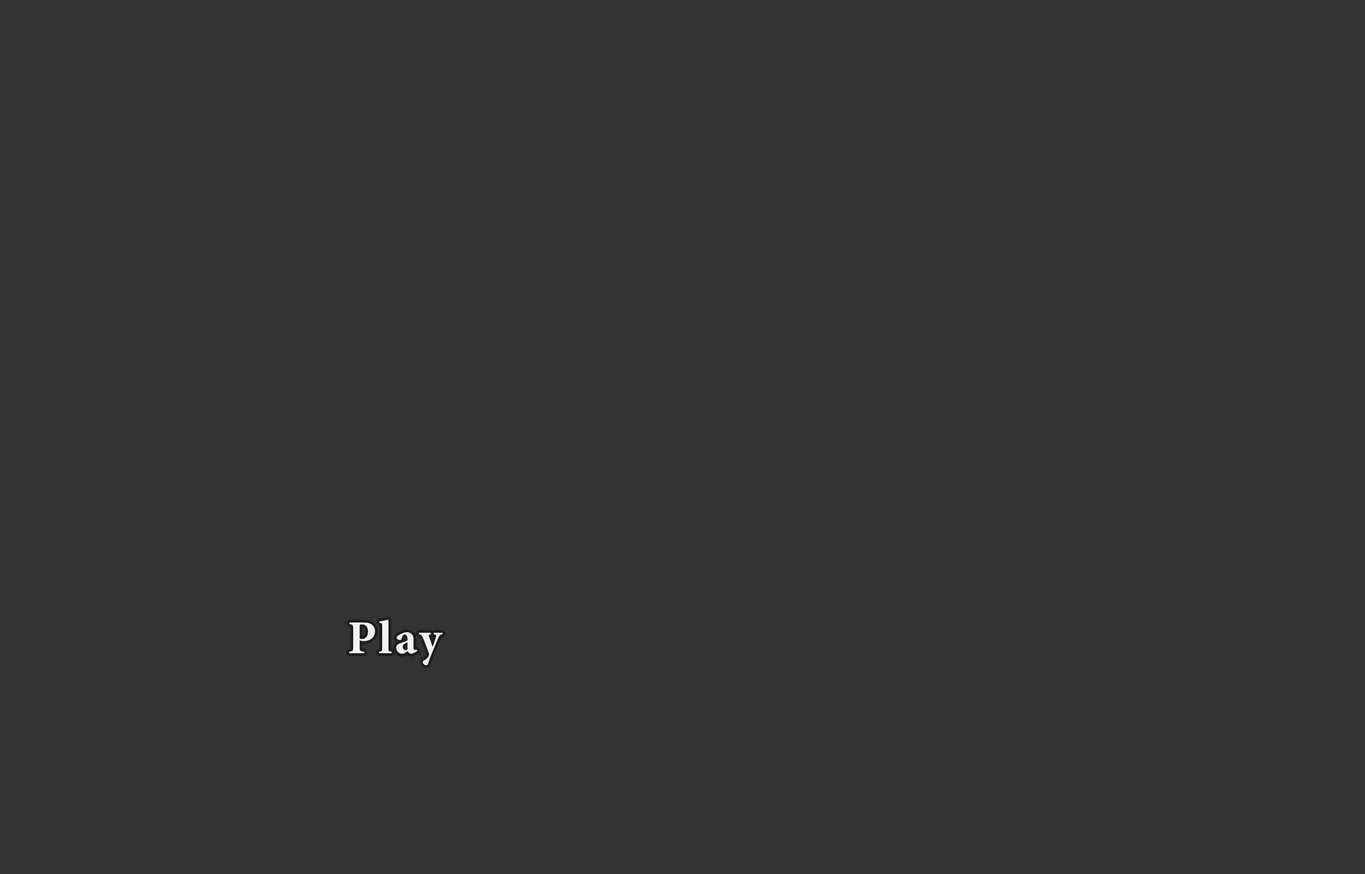
<style>
.page{position:relative;width:1365px;height:874px;background:#333333}
.page>*{position:absolute;margin:0}
.t1{font:47.4px "MinionPro-Bold";letter-spacing:0.05em;color:#f2f2f2}
</style>
<div class="page">
<p class="t1" style="left:349px;top:619px;width:93px;height:46px">Play</p>
</div>
